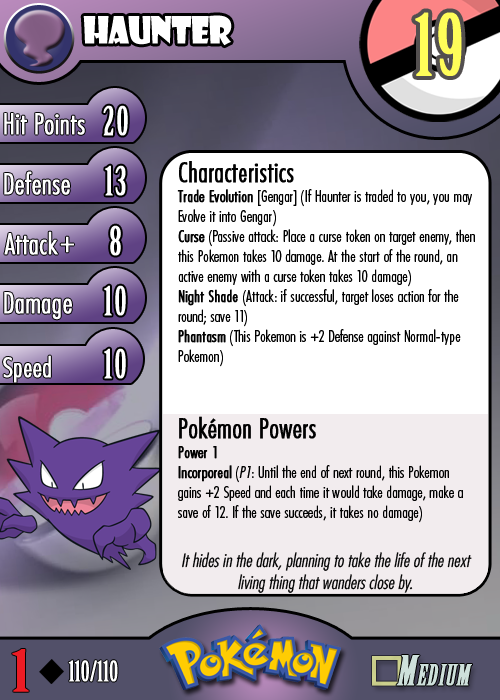
<style>
.page{position:relative;width:500px;height:700px;background:#ffffff}
.page>*{position:absolute;margin:0}
.t1{font:36.7px "ShowcardGothic-Reg";letter-spacing:-0.025em;color:#ffffff;scale:0.91 1}
.t2{font:83.3px "BirchStd";letter-spacing:0.025em;color:#fffd59;font-weight:bold}
.t3{font:27.8px "Futura-CondensedLight";color:#ffffff;font-weight:bold}
.t4{font:38.9px "BirchStd";letter-spacing:0.035em;color:#ffffff;font-weight:bold}
.t5{font:16.7px "FuturaCondensedBQ-Light";color:#010101}
.t6{font:27.8px "FuturaCondensedBQ-Light";color:#010101;font-weight:bold}
.t7{font:16.7px "FuturaCondensedBQ-Light";color:#010101;font-weight:bold}
.t8{font:16.7px "FuturaCondensedBQ-Light";color:#010101;font-style:italic}
.t9{font:30.6px "Futura-CondensedLight";color:#ffffff;font-weight:bold}
.t10{font:27.8px "FuturaCondensedBQ-Light";color:#ffffff;font-weight:bold}
.t11{font:18.1px "Futura-CondensedLight";color:#010101;font-style:italic}
.t12{font:55.6px "BirchStd";color:#ed1c24;font-weight:bold;scale:1.5 1}
.t13{font:27.8px "BirchStd";color:#ffffff;font-weight:bold}
</style>
<div class="page">
<p class="t1" style="left:83px;top:15px;width:149px;height:31px">haunter</p>
<p class="t2" style="left:415px;top:12px;width:47px;height:64px">19</p>
<p class="t3" style="left:4px;top:113px;width:81px;height:22px">Hit Points</p>
<p class="t4" style="left:103px;top:105px;width:25px;height:31px">20</p>
<p class="t5" style="left:177px;top:161px;width:298px;height:362px"><span class="t6">Characteristics<br></span><span class="t7">Trade Evolution </span>[Gengar] (If Haunter is traded to you, you may Evolve it into Gengar)<br><span class="t7">Curse</span> (Passive attack: Place a curse token on target enemy, then this Pokemon takes 10 damage. At the start of the round, an active enemy with a curse token takes 10 damage)<br><span class="t7">Night Shade</span> (Attack: if successful, target loses action for the round; save 11)<br><span class="t7">Phantasm</span> (This Pokemon is +2 Defense against Normal-type Pokemon)<br><br><br><span class="t6">Pokémon Powers<br></span><span class="t7">Power 1<br>Incorporeal</span> (<span class="t8">P1</span>: Until the end of next round, this Pokemon gains +2 Speed and each time it would take damage, make a save of 12. If the save succeeds, it takes no damage)</p>
<p class="t3" style="left:4px;top:171px;width:66px;height:24px">Defense</p>
<p class="t4" style="left:105px;top:165px;width:21px;height:31px">13</p>
<p class="t3" style="left:4px;top:231px;width:54px;height:24px">Attack</p>
<p class="t4" style="left:110px;top:225px;width:11px;height:31px">8</p>
<p class="t9" style="left:60px;top:236px;width:14px;height:17px">+</p>
<p class="t3" style="left:4px;top:292px;width:68px;height:28px">Damage</p>
<p class="t4" style="left:104px;top:285px;width:22px;height:31px">10</p>
<p class="t4" style="left:104px;top:348px;width:22px;height:31px">10</p>
<p class="t10" style="left:3px;top:355px;width:48px;height:28px">Speed</p>
<p class="t11" style="left:182px;top:552px;width:290px;height:41px;text-align:center">It hides in the dark, planning to take the life of the next living thing that wanders close by.</p>
<p class="t12" style="left:12px;top:649px;width:17px;height:43px">1</p>
<p class="t13" style="left:68px;top:660px;width:50px;height:22px">110/110</p>
</div>
